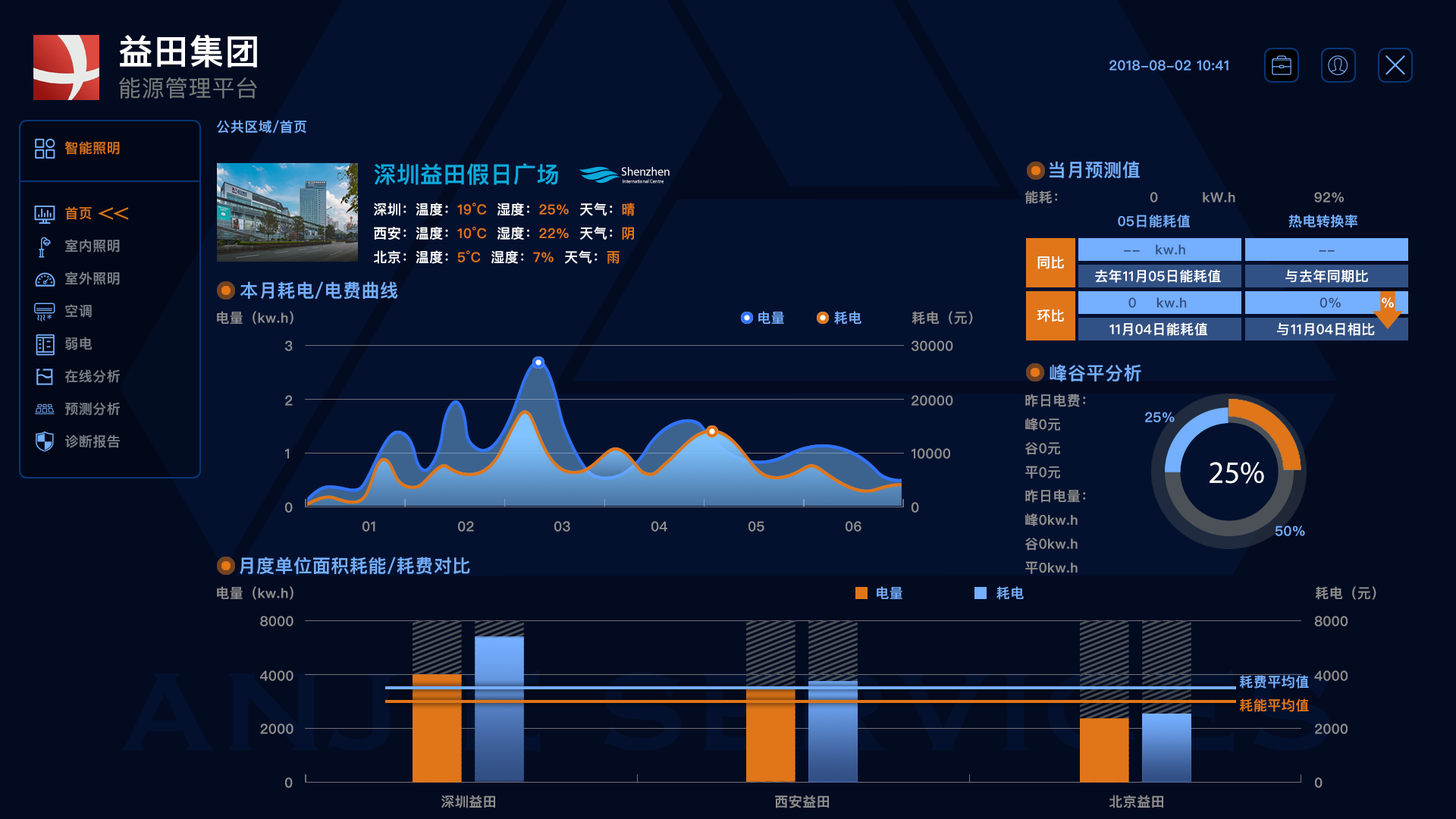
<style>
.page{position:relative;width:1456px;height:819px;background:#030b21}
.page>*{position:absolute;margin:0}
.t1{font:34.8px "PingFangSC-Semibold";letter-spacing:0.025em;color:#ffffff}
.t2{font:13.6px "PingFangSC-Semibold";letter-spacing:0.025em;color:#75afff}
.t3{font:22.9px "PingFangSC-Regular";letter-spacing:0.025em;color:#727a79}
.t4{font:13.6px/32.6px "PingFangSC-Semibold";letter-spacing:0.025em;color:#7a7f89}
.t5{font:13.6px/32.6px "PingFangSC-Semibold";letter-spacing:0.025em;color:#d26f1b}
.t6{font:18.2px "PingFangSC-Semibold";letter-spacing:0.025em;color:#75afff}
.t7{font:22.7px "PingFangSC-Semibold";letter-spacing:0.025em;color:#0caadc}
.t8{font:13.6px "PingFangSC-Semibold";letter-spacing:0.025em;color:#ffffff}
.t9{font:13.6px "PingFangSC-Semibold";letter-spacing:0.025em;color:#e07619}
.t10{font:11.8px "MyriadPro-Regular";color:#ffffff}
.t11{font:4.9px "MyriadPro-Regular"}
.t12{font:13.6px "PingFangSC-Semibold";letter-spacing:0.025em;color:#8f8f8f}
.t13{font:13.6px "PingFangSC-Semibold";letter-spacing:0.025em;color:#315184}
.t14{font:31.1px "MyriadPro-Regular";color:#ffffff}
</style>
<div class="page">
<p class="t1" style="left:119px;top:35px;width:138px;height:32px">益田集团</p>
<p class="t2" style="left:1109px;top:60px;width:119px;height:11px">2018-08-02 10:41</p>
<p class="t3" style="left:119px;top:77px;width:138px;height:22px">能源管理平台</p>
<p class="t2" style="left:217px;top:120px;width:89px;height:13px">公共区域/首页</p>
<p class="t4" style="left:64px;top:141px;width:56px;height:307px"><span class="t5">智能照明<br><br>首页<br></span>室内照明<br>室外照明<br>空调<br>弱电<br>在线分析<br>预测分析<br>诊断报告</p>
<p class="t6" style="left:1050px;top:161px;width:90px;height:18px">当月预测值</p>
<p class="t7" style="left:374px;top:163px;width:261px;height:101px">深圳益田假日广场<br><span class="t8">深圳：温度：</span><span class="t9">19°C  </span><span class="t8">湿度：</span><span class="t9">25%  </span><span class="t8">天气：</span><span class="t9">晴<br></span><span class="t8">西安：温度：</span><span class="t9">10°C  </span><span class="t8">湿度：</span><span class="t9">22%  </span><span class="t8">天气：</span><span class="t9">阴<br></span><span class="t8">北京：温度：</span><span class="t9">5°C  </span><span class="t8">湿度：</span><span class="t9">7%  </span><span class="t8">天气：</span><span class="t9">雨</span></p>
<p class="t10" style="left:621px;top:167px;width:49px;height:9px">Shenzhen</p>
<p class="t11" style="left:623px;top:179px;width:41px;height:5px">International Centre</p>
<p class="t12" style="left:1025px;top:190px;width:332px;height:37px">能耗：                 0         kW.h                92%<br>                   <span class="t2">05日能耗值                    热电转换率</span></p>
<p class="t13" style="left:1124px;top:244px;width:211px;height:11px">--   kw.h                           --</p>
<p class="t8" style="left:1037px;top:256px;width:27px;height:13px">同比</p>
<p class="t8" style="left:1095px;top:269px;width:273px;height:14px">去年11月05日能耗值             与去年同期比</p>
<p class="t6" style="left:240px;top:281px;width:158px;height:19px">本月耗电/电费曲线</p>
<p class="t13" style="left:1128px;top:297px;width:266px;height:11px">0    kw.h                           0%        <span class="t8">%</span></p>
<p class="t12" style="left:217px;top:311px;width:76px;height:14px">电量（kw.h）</p>
<p class="t2" style="left:758px;top:311px;width:103px;height:14px">电量          耗电</p>
<p class="t12" style="left:912px;top:311px;width:61px;height:14px">耗电（元）</p>
<p class="t8" style="left:1037px;top:309px;width:27px;height:13px">环比</p>
<p class="t8" style="left:1109px;top:322px;width:266px;height:14px">11月04日能耗值              与11月04日相比</p>
<p class="t12" style="left:285px;top:340px;width:8px;height:11px">3</p>
<p class="t12" style="left:912px;top:340px;width:41px;height:11px">30000</p>
<p class="t6" style="left:1050px;top:364px;width:91px;height:17px">峰谷平分析</p>
<p class="t12" style="left:285px;top:395px;width:8px;height:11px">2</p>
<p class="t12" style="left:912px;top:395px;width:41px;height:11px">20000</p>
<p class="t12" style="left:1025px;top:394px;width:61px;height:180px">昨日电费：     <br>峰0元           <br>谷0元           <br>平0元<br>昨日电量：     <br>峰0kw.h       <br>谷0kw.h        <br>平0kw.h</p>
<p class="t2" style="left:1145px;top:412px;width:30px;height:10px">25%</p>
<p class="t12" style="left:285px;top:448px;width:4px;height:11px">1</p>
<p class="t12" style="left:912px;top:448px;width:38px;height:11px">10000</p>
<p class="t14" style="left:1210px;top:462px;width:54px;height:22px">25%</p>
<p class="t12" style="left:285px;top:502px;width:8px;height:11px">0</p>
<p class="t12" style="left:912px;top:502px;width:7px;height:11px">0</p>
<p class="t12" style="left:362px;top:521px;width:13px;height:11px">01</p>
<p class="t12" style="left:458px;top:521px;width:16px;height:11px">02</p>
<p class="t12" style="left:554px;top:521px;width:16px;height:11px">03</p>
<p class="t12" style="left:651px;top:521px;width:16px;height:11px">04</p>
<p class="t12" style="left:748px;top:521px;width:16px;height:11px">05</p>
<p class="t12" style="left:846px;top:521px;width:15px;height:11px">06</p>
<p class="t2" style="left:1275px;top:526px;width:30px;height:10px">50%</p>
<p class="t6" style="left:240px;top:557px;width:230px;height:18px">月度单位面积耗能/耗费对比</p>
<p class="t12" style="left:217px;top:586px;width:76px;height:14px">电量（kw.h）</p>
<p class="t2" style="left:877px;top:586px;width:147px;height:14px">电量                   耗电</p>
<p class="t12" style="left:1315px;top:586px;width:61px;height:14px">耗电（元）</p>
<p class="t12" style="left:260px;top:616px;width:33px;height:10px">8000</p>
<p class="t12" style="left:1314px;top:616px;width:34px;height:10px">8000</p>
<p class="t12" style="left:260px;top:670px;width:33px;height:11px">4000</p>
<p class="t2" style="left:1239px;top:675px;width:70px;height:14px">耗费平均值</p>
<p class="t12" style="left:1314px;top:670px;width:34px;height:11px">4000</p>
<p class="t9" style="left:1239px;top:698px;width:70px;height:14px">耗能平均值</p>
<p class="t12" style="left:260px;top:723px;width:33px;height:11px">2000</p>
<p class="t12" style="left:1315px;top:723px;width:33px;height:11px">2000</p>
<p class="t12" style="left:285px;top:777px;width:8px;height:11px">0</p>
<p class="t12" style="left:1315px;top:777px;width:8px;height:11px">0</p>
<p class="t12" style="left:441px;top:795px;width:54px;height:13px">深圳益田</p>
<p class="t12" style="left:775px;top:795px;width:54px;height:13px">西安益田</p>
<p class="t12" style="left:1109px;top:795px;width:54px;height:13px">北京益田</p>
</div>
